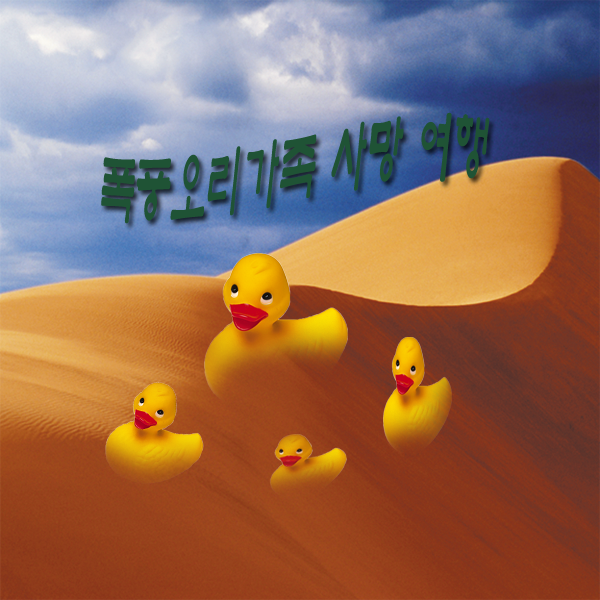
<style>
.page{position:relative;width:600px;height:600px}
.page>*{position:absolute;margin:0}
.t1{font:83.8px "YetR-HM";color:#1f5335;scale:0.42 1}
</style>
<div class="page">
<p class="t1" style="left:101px;top:112px;width:389px;height:112px;rotate:7deg">폭풍오리가족 사망 여행</p>
</div>
